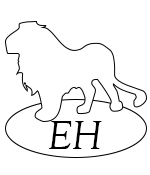
<style>
.page{position:relative;width:150px;height:175px;background:#ffffff}
.page>*{position:absolute;margin:0}
.t1{font:41.7px "GoudyOldStyleT-Italic";color:#000000}
</style>
<div class="page">
<p class="t1" style="left:49px;top:121px;width:53px;height:28px">EH</p>
</div>
